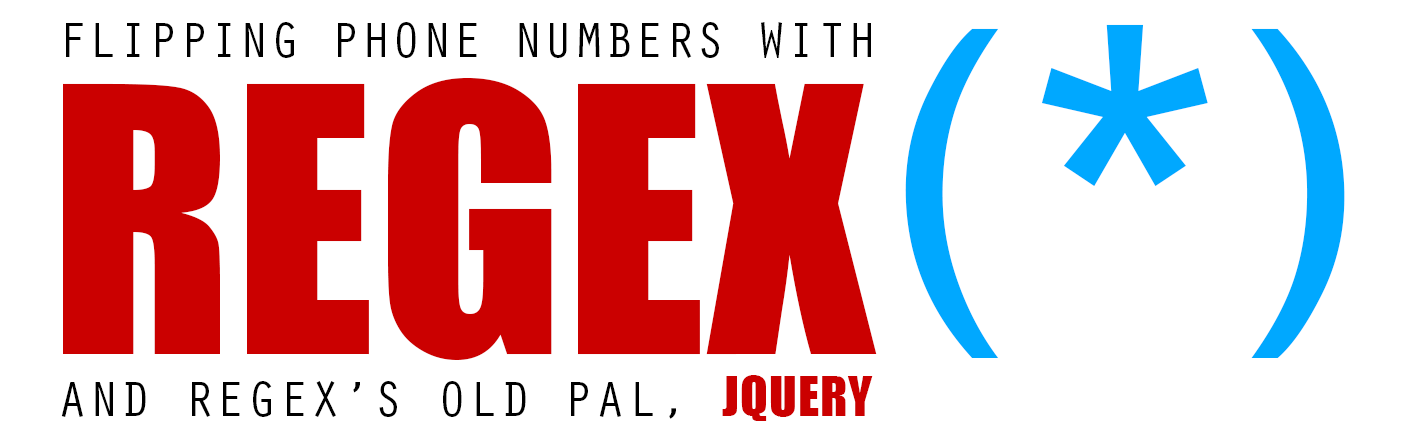
<style>
.page{position:relative;width:1409px;height:440px;background:#ffffff}
.page>*{position:absolute;margin:0}
.t1{font:50.6px "OratorStd";color:#000000}
.t2{font:395.5px "FranklinGothic-Medium";color:#00a8ff}
.t3{font:342.1px "Impact";color:#cb0000}
.t4{font:50.6px "OratorStd";letter-spacing:0.025em;color:#000000}
.t5{font:50.6px "Impact";letter-spacing:0.025em;color:#cb0000}
</style>
<div class="page">
<p class="t1" style="left:66px;top:22px;width:805px;height:36px">FLIPPING PHONE NUMBERS WITH</p>
<p class="t2" style="left:905px;top:24px;width:440px;height:334px">(*)</p>
<p class="t3" style="left:63px;top:77px;width:814px;height:283px">REGEX</p>
<p class="t4" style="left:61px;top:375px;width:812px;height:46px">AND REGEX’S OLD PAL, <span class="t5">JQUERY</span></p>
</div>
